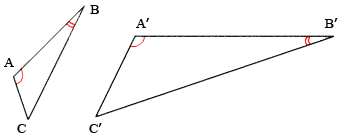
<style>
.page{position:relative;width:339px;height:139px;background:#ffffff}
.page>*{position:absolute;margin:0}
.t1{font:12.9px "TimesNewRomanPSMT";letter-spacing:-0.04em;color:#000000;scale:1.08 1}
.t2{font:12.9px "Verdana";letter-spacing:-0.04em;color:#000000;scale:1.08 1}
</style>
<div class="page">
<p class="t1" style="left:90px;top:5px;width:9px;height:9px">B</p>
<p class="t1" style="left:136px;top:18px;width:14px;height:10px">A<span class="t2">’</span></p>
<p class="t1" style="left:324px;top:18px;width:14px;height:10px">B<span class="t2">’</span></p>
<p class="t1" style="left:4px;top:58px;width:10px;height:9px">A</p>
<p class="t1" style="left:17px;top:124px;width:9px;height:9px">C</p>
<p class="t1" style="left:89px;top:123px;width:13px;height:10px">C<span class="t2">’</span></p>
</div>
